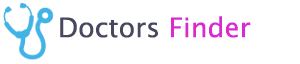
<style>
.page{position:relative;width:300px;height:64px;background:#ffffff}
.page>*{position:absolute;margin:0}
.t1{font:27px "LucidaSansUnicode";color:#47485e}
.t2{font:27px "LucidaSansUnicode";color:#d82ace}
</style>
<div class="page">
<p class="t1" style="left:60px;top:16px;width:191px;height:22px">Doctors <span class="t2">Finder</span></p>
</div>
